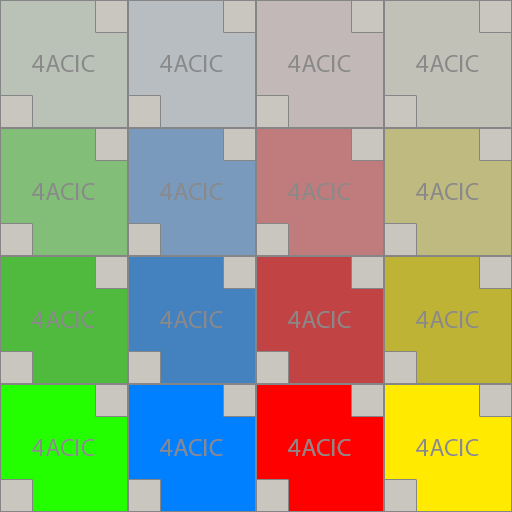
<style>
.page{position:relative;width:512px;height:512px}
.page>*{position:absolute;margin:0}
.t1{font:25px "MyriadPro-Regular";color:#898989}
</style>
<div class="page">
<p class="t1" style="left:32px;top:55px;width:63px;height:17px">4ACIC</p>
<p class="t1" style="left:160px;top:55px;width:63px;height:17px">4ACIC</p>
<p class="t1" style="left:288px;top:55px;width:63px;height:17px">4ACIC</p>
<p class="t1" style="left:416px;top:55px;width:63px;height:17px">4ACIC</p>
<p class="t1" style="left:32px;top:183px;width:63px;height:17px">4ACIC</p>
<p class="t1" style="left:160px;top:183px;width:63px;height:17px">4ACIC</p>
<p class="t1" style="left:288px;top:183px;width:63px;height:17px">4ACIC</p>
<p class="t1" style="left:416px;top:183px;width:63px;height:17px">4ACIC</p>
<p class="t1" style="left:32px;top:311px;width:63px;height:17px">4ACIC</p>
<p class="t1" style="left:160px;top:311px;width:63px;height:17px">4ACIC</p>
<p class="t1" style="left:288px;top:311px;width:63px;height:17px">4ACIC</p>
<p class="t1" style="left:416px;top:311px;width:63px;height:17px">4ACIC</p>
<p class="t1" style="left:32px;top:439px;width:63px;height:17px">4ACIC</p>
<p class="t1" style="left:160px;top:439px;width:63px;height:17px">4ACIC</p>
<p class="t1" style="left:288px;top:439px;width:63px;height:17px">4ACIC</p>
<p class="t1" style="left:416px;top:439px;width:63px;height:17px">4ACIC</p>
</div>
